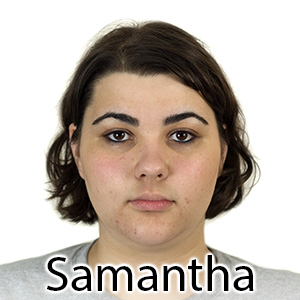
<style>
.page{position:relative;width:300px;height:300px;background:#ffffff}
.page>*{position:absolute;margin:0}
.t1{font:50px "MyriadPro-Regular";color:#000000}
</style>
<div class="page">
<p class="t1" style="left:46px;top:255px;width:208px;height:36px">Samantha</p>
</div>
